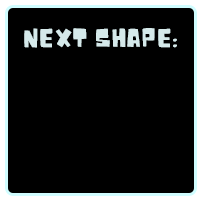
<style>
.page{position:relative;width:200px;height:200px;background:#000000}
.page>*{position:absolute;margin:0}
.t1{font:25px "Noot";color:#d5e9ea}
</style>
<div class="page">
<p class="t1" style="left:24px;top:28px;width:153px;height:20px">:NEXT SHAPE</p>
</div>
